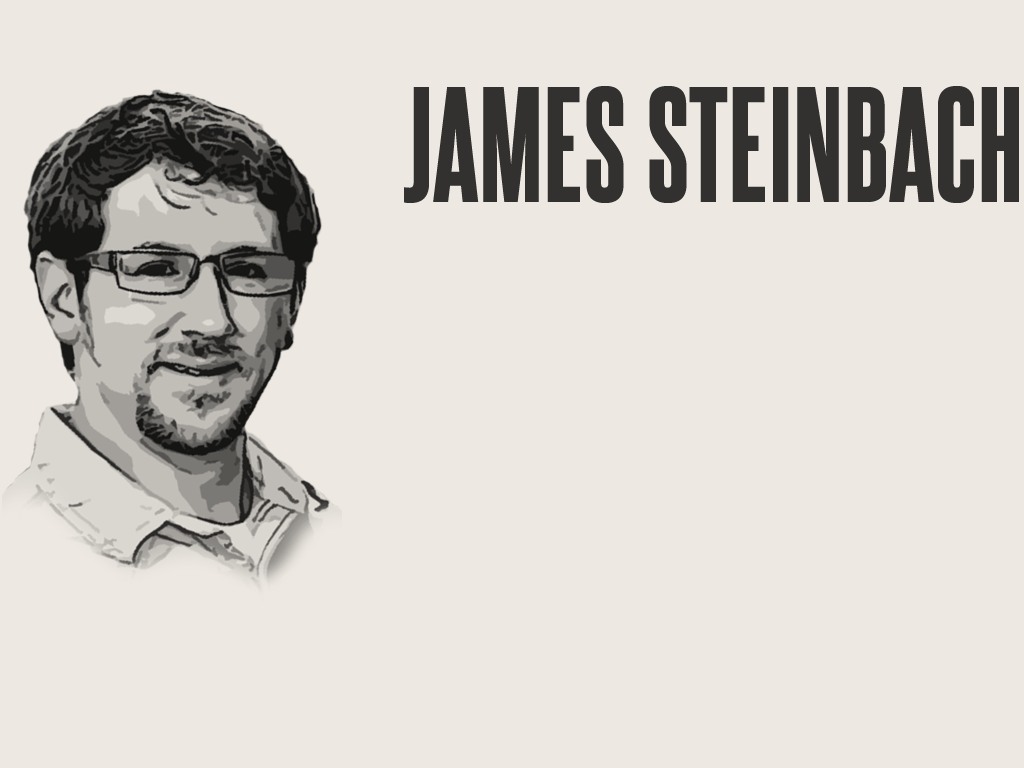
<style>
.page{position:relative;width:1024px;height:768px;background:#ede9e2}
.page>*{position:absolute;margin:0}
.t1{font:140px "SteelfishEb-Regular";color:#323130;text-transform:uppercase}
</style>
<div class="page">
<p class="t1" style="left:404px;top:86px;width:615px;height:117px">James Steinbach</p>
</div>
